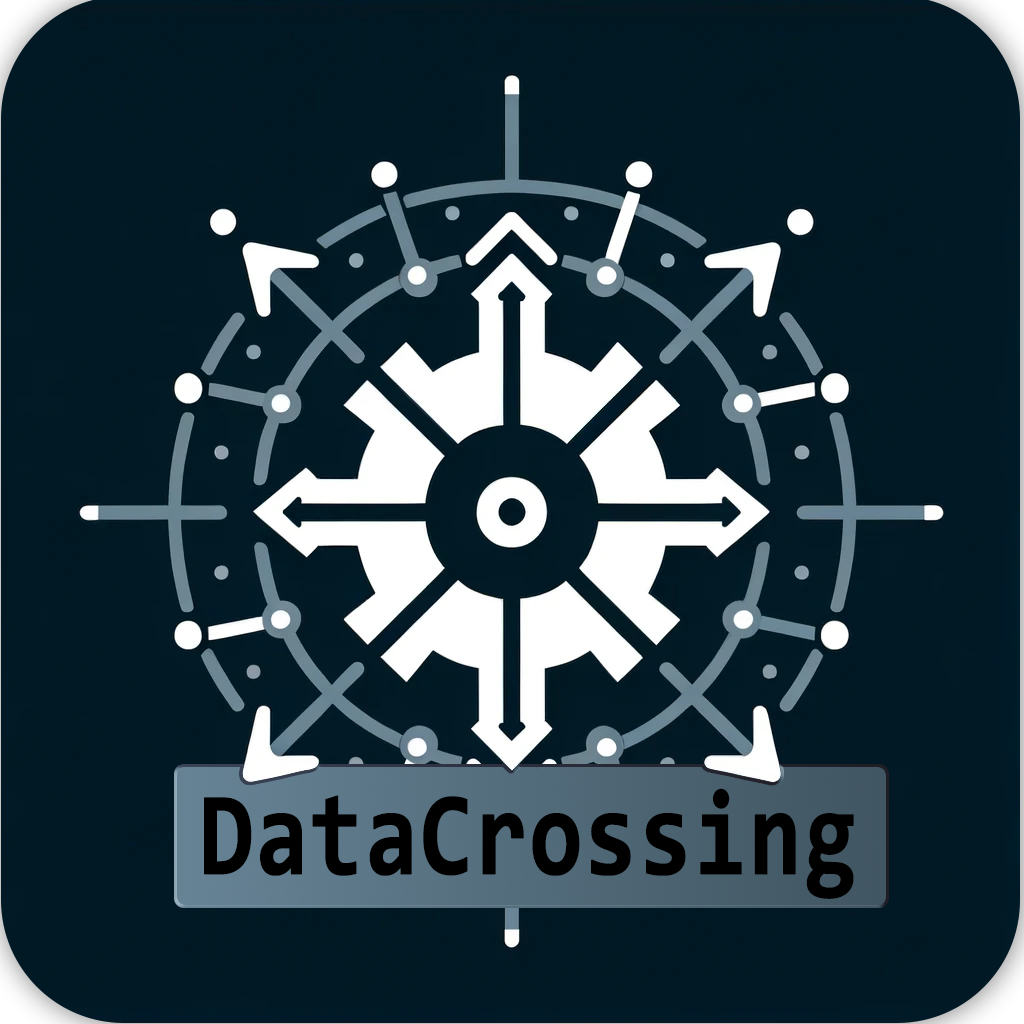
<style>
.page{position:relative;width:1024px;height:1024px;background:#001925}
.page>*{position:absolute;margin:0}
.t1{font:118.8px "Consolas-Bold";color:#000000;font-weight:bold;scale:0.8 1}
</style>
<div class="page">
<p class="t1" style="left:204px;top:788px;width:650px;height:111px">DataCrossing</p>
</div>
